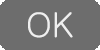
<style>
.page{position:relative;width:100px;height:50px;background:#6d6d6d}
.page>*{position:absolute;margin:0}
.t1{font:33.3px "Gulim";color:#efefef}
</style>
<div class="page">
<p class="t1" style="left:28px;top:12px;width:45px;height:26px">OK</p>
</div>
